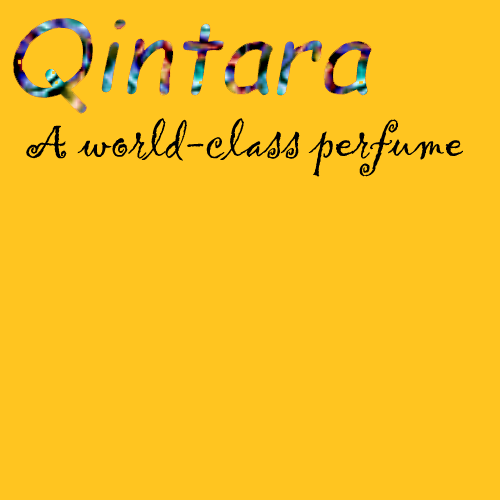
<style>
.page{position:relative;width:500px;height:500px;background:#ffc520}
.page>*{position:absolute;margin:0}
.t1{font:48px "Gigi-Regular";color:#000000;font-style:italic}
</style>
<div class="page">
<p class="t1" style="left:26px;top:118px;width:437px;height:59px">A world-class perfume</p>
</div>
